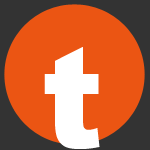
<style>
.page{position:relative;width:150px;height:150px;background:#eb5513}
.page>*{position:absolute;margin:0}
.t1{font:140px "Arial-Black";color:#ffffff}
</style>
<div class="page">
<p class="t1" style="left:44px;top:47px;width:56px;height:102px">t</p>
</div>
